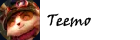
<style>
.page{position:relative;width:140px;height:40px;background:#ffffff}
.page>*{position:absolute;margin:0}
.t1{font:16px "VinerHandITC";color:#000000}
</style>
<div class="page">
<p class="t1" style="left:47px;top:13px;width:44px;height:15px">Teemo</p>
</div>
